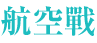
<style>
.page{position:relative;width:97px;height:43px;background:#ffffff}
.page>*{position:absolute;margin:0}
.t1{font:32px "RyuminPr6N-ExBold";color:#1dbdc0}
</style>
<div class="page">
<p class="t1" style="left:1px;top:5px;width:94px;height:31px">航空戰</p>
</div>
